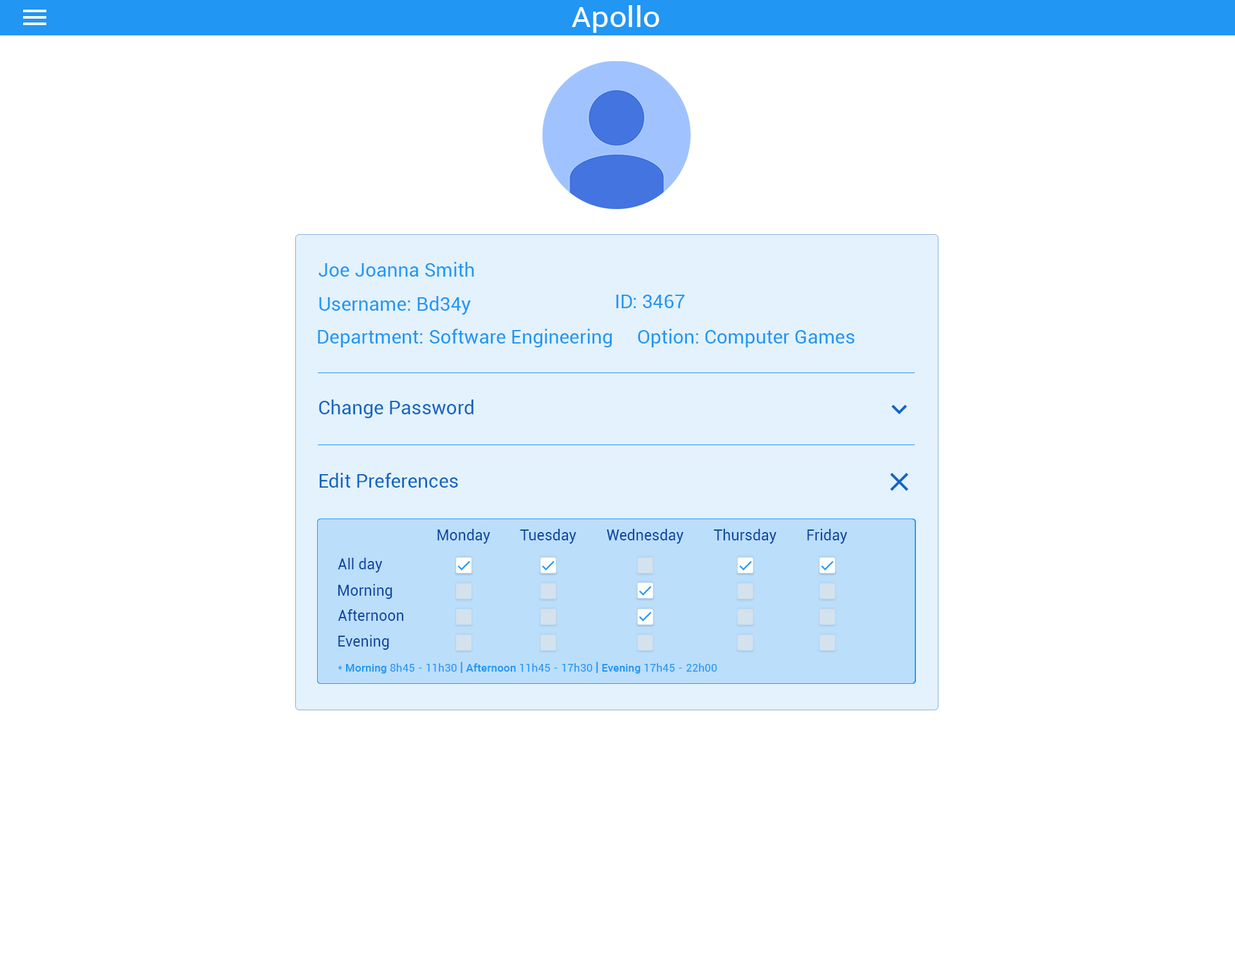
<style>
.page{position:relative;width:1235px;height:965px;background:#ffffff}
.page>*{position:absolute;margin:0}
.t1{font:29px "Roboto-Regular";color:#ffffff;scale:1.08 1}
.t2{font:19.3px "Roboto-Regular";color:#2196f3}
.t3{font:19.1px "Roboto-Regular";color:#2196f3}
.t4{font:19.3px "Roboto-Regular";color:#1565c0}
.t5{font:15px "Roboto-Regular";color:#0d47a1}
.t6{font:11.2px "Roboto-Regular";color:#2196f3}
.t7{font:11.2px "Roboto-Medium";color:#2196f3}
.t8{font:13.4px "Roboto-Regular";color:#2196f3}
</style>
<div class="page">
<p class="t1" style="left:572px;top:5px;width:88px;height:28px">Apollo</p>
<p class="t2" style="left:319px;top:262px;width:155px;height:15px">Joe Joanna Smith</p>
<p class="t2" style="left:319px;top:296px;width:152px;height:19px">Username: Bd34y</p>
<p class="t2" style="left:616px;top:295px;width:69px;height:13px">ID: 3467</p>
<p class="t3" style="left:318px;top:329px;width:294px;height:18px">Department: Software Engineering</p>
<p class="t3" style="left:638px;top:329px;width:217px;height:18px">Option: Computer Games</p>
<p class="t4" style="left:319px;top:400px;width:155px;height:18px">Change Password</p>
<p class="t4" style="left:320px;top:473px;width:138px;height:15px">Edit Preferences</p>
<p class="t5" style="left:438px;top:529px;width:52px;height:15px">Monday</p>
<p class="t5" style="left:520px;top:529px;width:57px;height:15px">Tuesday</p>
<p class="t5" style="left:607px;top:529px;width:77px;height:15px">Wednesday</p>
<p class="t5" style="left:714px;top:529px;width:63px;height:15px">Thursday</p>
<p class="t5" style="left:808px;top:529px;width:39px;height:15px">Friday</p>
<p class="t5" style="left:338px;top:558px;width:45px;height:15px">All day</p>
<p class="t5" style="left:338px;top:584px;width:55px;height:15px">Morning</p>
<p class="t5" style="left:338px;top:609px;width:65px;height:12px">Afternoon</p>
<p class="t5" style="left:338px;top:635px;width:51px;height:15px">Evening</p>
<p class="t6" style="left:338px;top:662px;width:379px;height:12px">* <span class="t7">Morning</span> 8h45 - 11h30 <span class="t8">| </span><span class="t7">Afternoon</span> 11h45 - 17h30 <span class="t8">| </span><span class="t7">Evening</span> 17h45 - 22h00</p>
</div>
